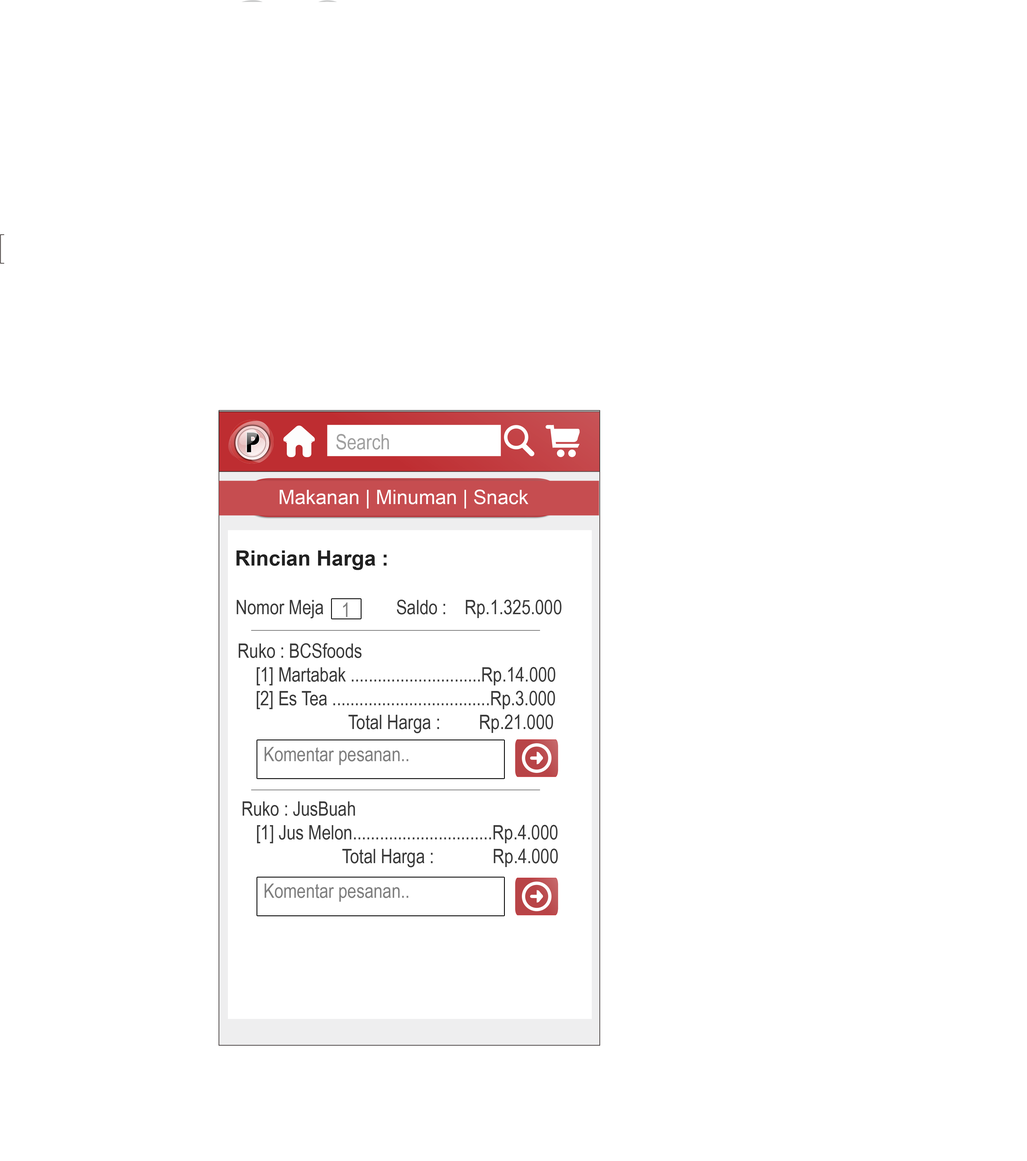
<style>
.page{position:relative;width:1027px;height:1161px;background:#ffffff}
.page>*{position:absolute;margin:0}
.t1{font:21px "ArialNarrow";color:#a0a0a0}
.t2{font:19.8px "ArialMT";color:#fffefe}
.t3{font:21px "Arial-BoldMT";color:#212121}
.t4{font:19.8px "ArialNarrow";color:#3a3a3a}
.t5{font:19.8px "ArialNarrow";color:#7f7f7f}
</style>
<div class="page">
<p class="t1" style="left:336px;top:434px;width:53px;height:16px">Search</p>
<p class="t2" style="left:280px;top:490px;width:249px;height:19px">Makanan | Minuman | Snack</p>
<p class="t3" style="left:236px;top:550px;width:151px;height:20px">Rincian Harga :</p>
<p class="t4" style="left:237px;top:600px;width:325px;height:18px">Nomor Meja                Saldo :    Rp.1.325.000</p>
<p class="t5" style="left:343px;top:602px;width:5px;height:15px">1</p>
<p class="t4" style="left:239px;top:643px;width:316px;height:90px">Ruko : BCSfoods<br>    [1] Martabak .............................Rp.14.000<br>    [2] Es Tea ...................................Rp.3.000<br>           Total Harga :    Rp.21.000</p>
<p class="t5" style="left:265px;top:747px;width:143px;height:18px">Komentar pesanan..</p>
<p class="t4" style="left:243px;top:801px;width:315px;height:66px">Ruko : JusBuah<br>  [1] Jus Melon...............................Rp.4.000<br>          Total Harga :             Rp.4.000</p>
<p class="t5" style="left:265px;top:883px;width:143px;height:19px">Komentar pesanan..</p>
</div>
